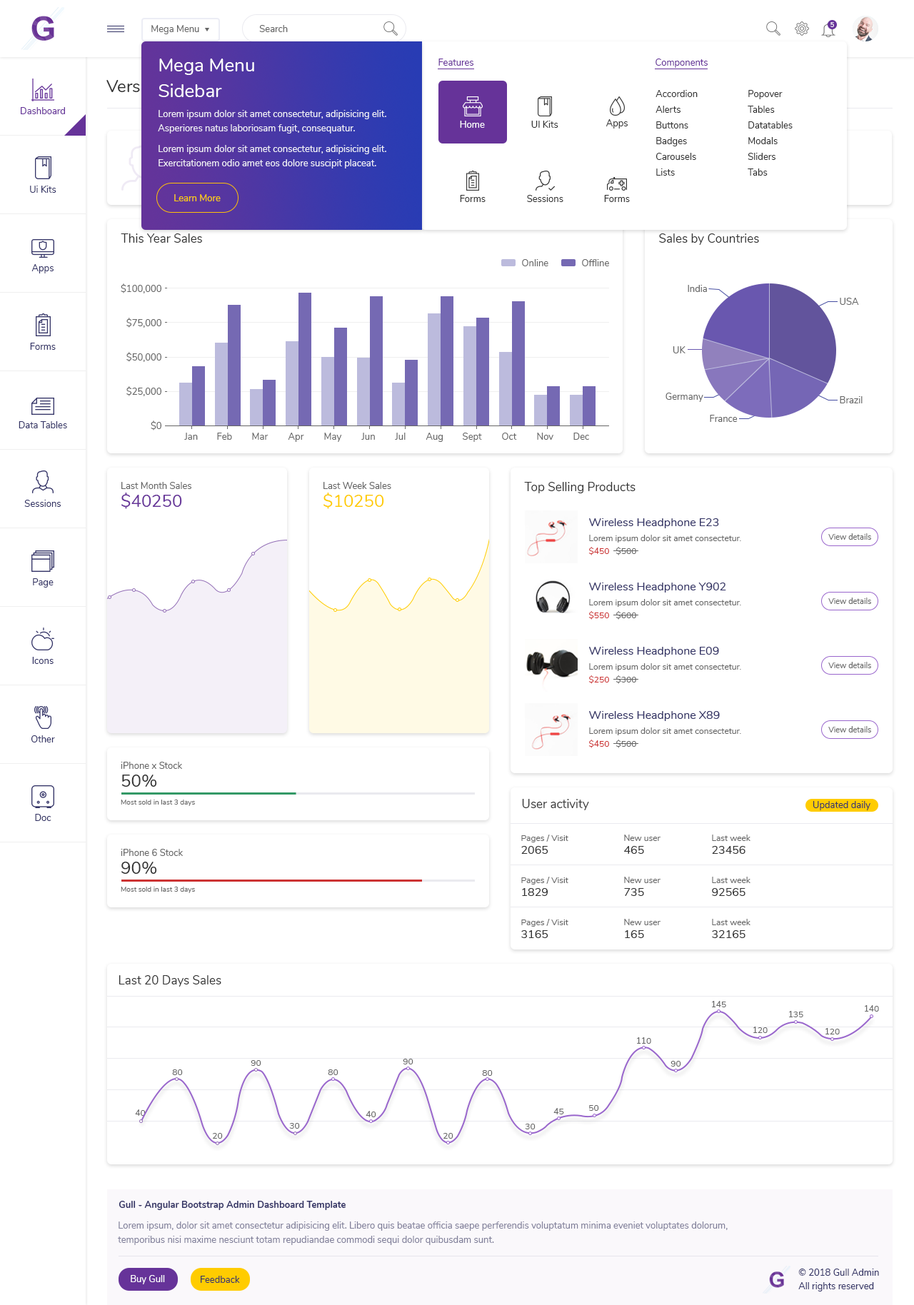
<style>
.page{position:relative;width:914px;height:1305px;background:#ffffff}
.page>*{position:absolute;margin:0}
.t1{font:9.3px "Nunito-Regular";color:#666666}
.t2{font:6.4px "Nunito-SemiBold";color:#ffffff}
.t3{font:18.6px/25.7px "Nunito-Regular";color:#ffffff}
.t4{font:9.3px "Nunito-Regular";color:#663399}
.t5{font:17.1px "Nunito-Regular"}
.t6{font:9.3px/15.7px "Nunito-Regular";color:#333333}
.t7{font:9.3px/14.3px "Nunito-Regular";color:#ffffff}
.t8{font:9.3px "Nunito-Regular";color:#ffffff}
.t9{font:9.3px "Nunito-Regular";color:#333333}
.t10{font:9.3px "Nunito-Regular";color:#333366}
.t11{font:9.3px "Nunito-Regular";color:#ffcc00}
.t12{font:12.1px "Nunito-Regular";color:#333333}
.t13{font:17.1px "Nunito-Regular";color:#663399}
.t14{font:17.1px "Nunito-Regular";color:#ffcc00}
.t15{font:11.4px "Nunito-Regular";color:#333366}
.t16{font:7.9px "Nunito-Regular";color:#666666}
.t17{font:8.6px "Nunito-Regular";color:#666666}
.t18{font:8.6px "Nunito-Regular";color:#cc3333}
.t19{font:17.1px "Nunito-Regular";color:#333333}
.t20{font:7.1px "Nunito-Regular";color:#666666}
.t21{font:11.4px "Nunito-Regular";color:#333333}
.t22{font:9.3px "Nunito-Bold";color:#333366}
.t23{font:9.3px/14.3px "Nunito-Regular";color:#82819b}
</style>
<div class="page">
<p class="t1" style="left:151px;top:25px;width:48px;height:9px">Mega Menu</p>
<p class="t1" style="left:259px;top:25px;width:29px;height:7px">Search</p>
<p class="t2" style="left:830px;top:22px;width:4px;height:5px">5</p>
<p class="t3" style="left:158px;top:59px;width:96px;height:38px">Mega Menu <br>Sidebar</p>
<p class="t4" style="left:438px;top:59px;width:35px;height:7px">Features</p>
<p class="t4" style="left:655px;top:59px;width:52px;height:9px">Components</p>
<p class="t5" style="left:106px;top:80px;width:72px;height:12px">Version 1</p>
<p class="t6" style="left:655px;top:90px;width:42px;height:86px">Accordion<br>Alerts<br>Buttons<br>Badges<br>Carousels<br>Lists</p>
<p class="t6" style="left:747px;top:90px;width:45px;height:86px">Popover<br>Tables<br>Datatables<br>Modals<br>Sliders<br>Tabs</p>
<p class="t4" style="left:21px;top:107px;width:44px;height:7px">Dashboard</p>
<p class="t7" style="left:158px;top:110px;width:228px;height:23px;opacity:0.9">Lorem ipsum dolor sit amet consectetur, adipisicing elit. Asperiores natus laboriosam fugit, consequatur.</p>
<p class="t8" style="left:460px;top:121px;width:25px;height:7px">Home</p>
<p class="t9" style="left:531px;top:121px;width:27px;height:7px">UI Kits</p>
<p class="t9" style="left:606px;top:119px;width:21px;height:9px">Apps</p>
<p class="t7" style="left:158px;top:145px;width:228px;height:23px;opacity:0.9">Lorem ipsum dolor sit amet consectetur, adipisicing elit. Exercitationem odio amet eos dolore suscipit placeat.</p>
<p class="t10" style="left:30px;top:186px;width:26px;height:7px">Ui Kits</p>
<p class="t11" style="left:174px;top:194px;width:47px;height:7px">Learn More</p>
<p class="t9" style="left:460px;top:195px;width:25px;height:7px">Forms</p>
<p class="t9" style="left:527px;top:195px;width:36px;height:7px">Sessions</p>
<p class="t9" style="left:604px;top:195px;width:26px;height:7px">Forms</p>
<p class="t12" style="left:121px;top:233px;width:81px;height:10px">This Year Sales</p>
<p class="t12" style="left:659px;top:233px;width:100px;height:12px">Sales by Countries</p>
<p class="t10" style="left:31px;top:264px;width:23px;height:9px">Apps</p>
<p class="t1" style="left:522px;top:259px;width:26px;height:7px">Online</p>
<p class="t1" style="left:582px;top:259px;width:27px;height:7px">Offline</p>
<p class="t1" style="left:121px;top:283px;width:40px;height:10px">$100,000</p>
<p class="t1" style="left:687px;top:285px;width:20px;height:7px">India</p>
<p class="t1" style="left:840px;top:298px;width:19px;height:7px">USA</p>
<p class="t1" style="left:126px;top:318px;width:35px;height:10px">$75,000</p>
<p class="t10" style="left:30px;top:343px;width:26px;height:7px">Forms</p>
<p class="t1" style="left:126px;top:352px;width:35px;height:10px">$50,000</p>
<p class="t1" style="left:672px;top:346px;width:13px;height:7px">UK</p>
<p class="t1" style="left:126px;top:386px;width:35px;height:10px">$25,000</p>
<p class="t1" style="left:665px;top:393px;width:38px;height:9px">Germany</p>
<p class="t1" style="left:840px;top:396px;width:22px;height:7px">Brazil</p>
<p class="t10" style="left:19px;top:421px;width:48px;height:7px">Data Tables</p>
<p class="t1" style="left:151px;top:420px;width:10px;height:10px">$0</p>
<p class="t1" style="left:710px;top:415px;width:27px;height:7px">France</p>
<p class="t1" style="left:184px;top:433px;width:14px;height:7px">Jan</p>
<p class="t1" style="left:217px;top:433px;width:15px;height:7px">Feb</p>
<p class="t1" style="left:252px;top:433px;width:16px;height:7px">Mar</p>
<p class="t1" style="left:288px;top:433px;width:16px;height:9px">Apr</p>
<p class="t1" style="left:324px;top:433px;width:18px;height:9px">May</p>
<p class="t1" style="left:361px;top:433px;width:14px;height:7px">Jun</p>
<p class="t1" style="left:395px;top:433px;width:10px;height:7px">Jul</p>
<p class="t1" style="left:425px;top:433px;width:18px;height:9px">Aug</p>
<p class="t1" style="left:463px;top:433px;width:19px;height:9px">Sept</p>
<p class="t1" style="left:502px;top:433px;width:15px;height:7px">Oct</p>
<p class="t1" style="left:537px;top:433px;width:16px;height:7px">Nov</p>
<p class="t1" style="left:573px;top:433px;width:16px;height:7px">Dec</p>
<p class="t1" style="left:121px;top:482px;width:70px;height:7px">Last Month Sales</p>
<p class="t1" style="left:323px;top:482px;width:68px;height:7px">Last Week Sales</p>
<p class="t12" style="left:524px;top:482px;width:111px;height:11px">Top Selling Products</p>
<p class="t13" style="left:121px;top:493px;width:61px;height:16px">$40250</p>
<p class="t14" style="left:323px;top:493px;width:61px;height:16px">$10250</p>
<p class="t10" style="left:24px;top:500px;width:37px;height:7px">Sessions</p>
<p class="t15" style="left:589px;top:518px;width:130px;height:10px">Wireless Headphone E23</p>
<p class="t16" style="left:828px;top:533px;width:43px;height:7px">View details</p>
<p class="t17" style="left:589px;top:535px;width:152px;height:8px">Lorem ipsum dolor sit amet consectetur.</p>
<p class="t18" style="left:588px;top:547px;width:21px;height:8px">$450</p>
<p class="t17" style="left:615px;top:547px;width:21px;height:8px">$500</p>
<p class="t10" style="left:33px;top:578px;width:21px;height:10px">Page</p>
<p class="t15" style="left:589px;top:583px;width:137px;height:10px">Wireless Headphone Y902</p>
<p class="t17" style="left:589px;top:599px;width:152px;height:8px">Lorem ipsum dolor sit amet consectetur.</p>
<p class="t16" style="left:828px;top:598px;width:43px;height:6px">View details</p>
<p class="t18" style="left:588px;top:611px;width:21px;height:9px">$550</p>
<p class="t17" style="left:615px;top:611px;width:21px;height:9px">$600</p>
<p class="t15" style="left:589px;top:647px;width:130px;height:10px">Wireless Headphone E09</p>
<p class="t10" style="left:32px;top:657px;width:22px;height:7px">Icons</p>
<p class="t17" style="left:589px;top:663px;width:152px;height:8px">Lorem ipsum dolor sit amet consectetur.</p>
<p class="t16" style="left:828px;top:662px;width:43px;height:6px">View details</p>
<p class="t18" style="left:588px;top:675px;width:21px;height:9px">$250</p>
<p class="t17" style="left:615px;top:675px;width:21px;height:9px">$300</p>
<p class="t15" style="left:589px;top:711px;width:131px;height:10px">Wireless Headphone X89</p>
<p class="t10" style="left:31px;top:735px;width:24px;height:7px">Other</p>
<p class="t17" style="left:589px;top:727px;width:152px;height:8px">Lorem ipsum dolor sit amet consectetur.</p>
<p class="t16" style="left:828px;top:726px;width:43px;height:6px">View details</p>
<p class="t18" style="left:588px;top:740px;width:21px;height:8px">$450</p>
<p class="t17" style="left:615px;top:740px;width:21px;height:8px">$500</p>
<p class="t1" style="left:121px;top:762px;width:61px;height:7px">iPhone x Stock</p>
<p class="t19" style="left:121px;top:775px;width:36px;height:12px">50%</p>
<p class="t20" style="left:121px;top:800px;width:74px;height:6px">Most sold in last 3 days</p>
<p class="t12" style="left:522px;top:799px;width:67px;height:11px">User activity</p>
<p class="t10" style="left:812px;top:801px;width:58px;height:9px">Updated daily</p>
<p class="t10" style="left:35px;top:814px;width:16px;height:7px">Doc</p>
<p class="t17" style="left:521px;top:835px;width:47px;height:7px">Pages / Visit</p>
<p class="t21" style="left:521px;top:846px;width:27px;height:8px">2065</p>
<p class="t17" style="left:624px;top:835px;width:36px;height:6px">New user</p>
<p class="t21" style="left:624px;top:846px;width:20px;height:8px">465</p>
<p class="t17" style="left:712px;top:835px;width:38px;height:6px">Last week</p>
<p class="t21" style="left:712px;top:846px;width:33px;height:8px">23456</p>
<p class="t1" style="left:121px;top:849px;width:62px;height:7px">iPhone 6 Stock</p>
<p class="t19" style="left:121px;top:862px;width:36px;height:12px">90%</p>
<p class="t17" style="left:521px;top:877px;width:47px;height:7px">Pages / Visit</p>
<p class="t17" style="left:624px;top:877px;width:36px;height:6px">New user</p>
<p class="t17" style="left:712px;top:877px;width:38px;height:6px">Last week</p>
<p class="t20" style="left:121px;top:887px;width:74px;height:6px">Most sold in last 3 days</p>
<p class="t21" style="left:522px;top:888px;width:26px;height:8px">1829</p>
<p class="t21" style="left:624px;top:888px;width:20px;height:8px">735</p>
<p class="t21" style="left:712px;top:888px;width:33px;height:8px">92565</p>
<p class="t17" style="left:521px;top:919px;width:47px;height:8px">Pages / Visit</p>
<p class="t17" style="left:624px;top:919px;width:36px;height:6px">New user</p>
<p class="t17" style="left:712px;top:919px;width:38px;height:6px">Last week</p>
<p class="t21" style="left:521px;top:930px;width:27px;height:8px">3165</p>
<p class="t21" style="left:625px;top:930px;width:19px;height:8px">165</p>
<p class="t21" style="left:712px;top:930px;width:33px;height:8px">32165</p>
<p class="t12" style="left:119px;top:975px;width:102px;height:12px">Last 20 Days Sales</p>
<p class="t17" style="left:712px;top:1001px;width:14px;height:6px">145</p>
<p class="t17" style="left:789px;top:1011px;width:14px;height:6px">135</p>
<p class="t17" style="left:865px;top:1005px;width:14px;height:7px">140</p>
<p class="t17" style="left:637px;top:1037px;width:14px;height:7px">110</p>
<p class="t17" style="left:753px;top:1027px;width:14px;height:6px">120</p>
<p class="t17" style="left:825px;top:1028px;width:15px;height:6px">120</p>
<p class="t17" style="left:251px;top:1060px;width:10px;height:6px">90</p>
<p class="t17" style="left:403px;top:1059px;width:10px;height:5px">90</p>
<p class="t17" style="left:670px;top:1061px;width:11px;height:6px">90</p>
<p class="t17" style="left:172px;top:1069px;width:11px;height:6px">80</p>
<p class="t17" style="left:328px;top:1069px;width:10px;height:6px">80</p>
<p class="t17" style="left:482px;top:1070px;width:11px;height:6px">80</p>
<p class="t17" style="left:135px;top:1109px;width:11px;height:7px">40</p>
<p class="t17" style="left:553px;top:1108px;width:11px;height:6px">45</p>
<p class="t17" style="left:589px;top:1105px;width:10px;height:6px">50</p>
<p class="t17" style="left:366px;top:1111px;width:10px;height:6px">40</p>
<p class="t17" style="left:212px;top:1133px;width:11px;height:6px">20</p>
<p class="t17" style="left:289px;top:1123px;width:11px;height:6px">30</p>
<p class="t17" style="left:443px;top:1133px;width:10px;height:6px">20</p>
<p class="t17" style="left:525px;top:1124px;width:10px;height:5px">30</p>
<p class="t22" style="left:119px;top:1201px;width:227px;height:9px">Gull - Angular Bootstrap Admin Dashboard Template</p>
<p class="t23" style="left:118px;top:1221px;width:609px;height:24px">Lorem ipsum, dolor sit amet consectetur adipisicing elit. Libero quis beatae officia saepe perferendis voluptatum minima eveniet voluptates dolorum, <br>temporibus nisi maxime nesciunt totam repudiandae commodi sequi dolor quibusdam sunt.</p>
<p class="t8" style="left:131px;top:1275px;width:34px;height:9px">Buy Gull</p>
<p class="t10" style="left:201px;top:1276px;width:39px;height:7px">Feedback</p>
<p class="t10" style="left:798px;top:1269px;width:81px;height:7px">© 2018 Gull Admin</p>
<p class="t10" style="left:798px;top:1282px;width:76px;height:9px">All rights reserved</p>
</div>
